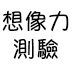
<style>
.page{position:relative;width:72px;height:72px;background:#ffffff}
.page>*{position:absolute;margin:0}
.t1{font:23.3px "YuppyTC-Regular";color:#000000}
</style>
<div class="page">
<p class="t1" style="left:2px;top:10px;width:67px;height:49px;text-align:center">想像力<br>測驗</p>
</div>
